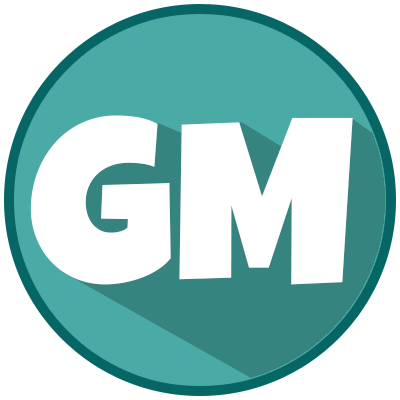
<style>
.page{position:relative;width:400px;height:400px;background:#ffffff}
.page>*{position:absolute;margin:0}
.t1{font:229.2px "LuckiestGuy-Regular";color:#ffffff}
</style>
<div class="page">
<p class="t1" style="left:30px;top:115px;width:323px;height:170px">GM</p>
</div>
